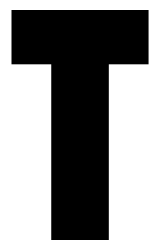
<style>
.page{position:relative;width:160px;height:250px;background:#ffffff}
.page>*{position:absolute;margin:0}
.t1{font:250px "VLNLDonuts-Regular";color:#000000}
</style>
<div class="page">
<p class="t1" style="left:11px;top:10px;width:138px;height:230px">T</p>
</div>
